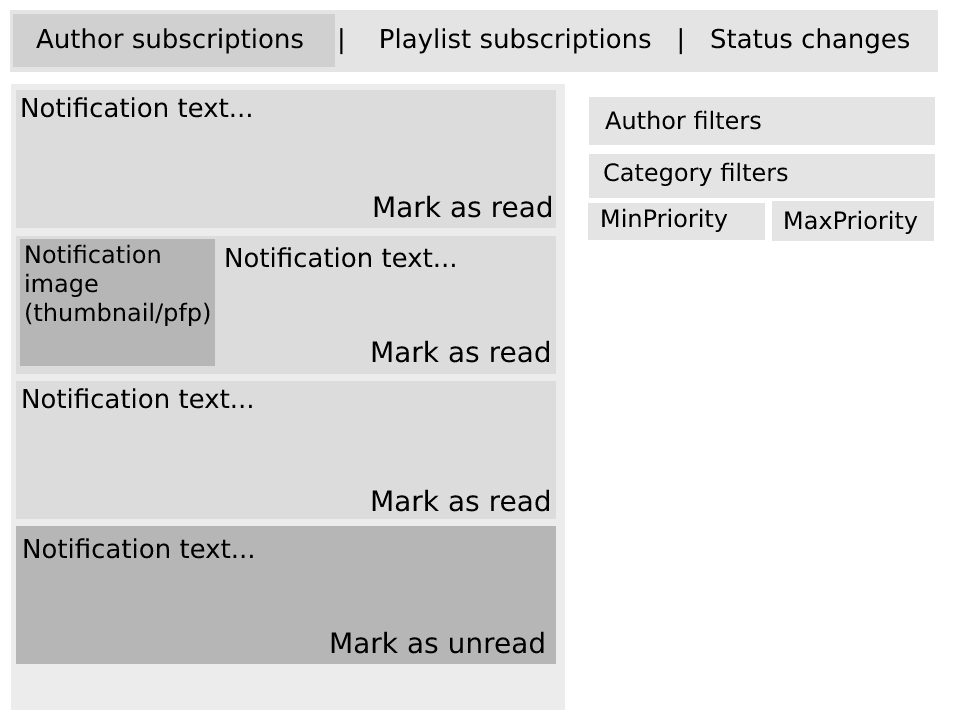
<style>
.page{position:relative;width:960px;height:720px;background:#ffffff}
.page>*{position:absolute;margin:0}
.t1{font:26px "DejaVuSans";color:#000000}
.t2{font:24px "DejaVuSans";color:#000000}
.t3{font:28px "DejaVuSans";color:#000000}
</style>
<div class="page">
<p class="t1" style="left:36px;top:28px;width:874px;height:27px">Author subscriptions    |    Playlist subscriptions   |   Status changes</p>
<p class="t1" style="left:22px;top:97px;width:229px;height:21px">Notification text...</p>
<p class="t2" style="left:605px;top:110px;width:156px;height:20px">Author filters</p>
<p class="t2" style="left:604px;top:162px;width:184px;height:24px">Category filters</p>
<p class="t3" style="left:374px;top:195px;width:178px;height:23px">Mark as read</p>
<p class="t2" style="left:602px;top:208px;width:126px;height:24px">MinPriority</p>
<p class="t2" style="left:785px;top:210px;width:133px;height:24px">MaxPriority</p>
<p class="t2" style="left:26px;top:244px;width:184px;height:82px">Notification image (thumbnail/pfp)</p>
<p class="t1" style="left:226px;top:247px;width:229px;height:21px">Notification text...</p>
<p class="t3" style="left:372px;top:340px;width:178px;height:23px">Mark as read</p>
<p class="t1" style="left:23px;top:388px;width:229px;height:21px">Notification text...</p>
<p class="t3" style="left:372px;top:489px;width:178px;height:23px">Mark as read</p>
<p class="t1" style="left:24px;top:538px;width:229px;height:21px">Notification text...</p>
<p class="t3" style="left:331px;top:631px;width:213px;height:23px">Mark as unread</p>
</div>
